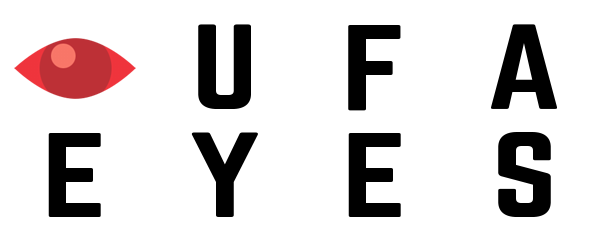
<style>
.page{position:relative;width:600px;height:240px;background:#ffffff}
.page>*{position:absolute;margin:0}
.t1{font:105.6px "Norwester-Regular";letter-spacing:0.05em;color:#000000;scale:1.23 1}
</style>
<div class="page">
<p class="t1" style="left:198px;top:24px;width:53px;height:85px">U</p>
<p class="t1" style="left:348px;top:25px;width:53px;height:86px">F</p>
<p class="t1" style="left:491px;top:24px;width:66px;height:85px">A</p>
<p class="t1" style="left:48px;top:133px;width:53px;height:84px">E</p>
<p class="t1" style="left:191px;top:132px;width:67px;height:85px">Y</p>
<p class="t1" style="left:348px;top:133px;width:53px;height:84px">E</p>
<p class="t1" style="left:498px;top:132px;width:53px;height:85px">S</p>
</div>
